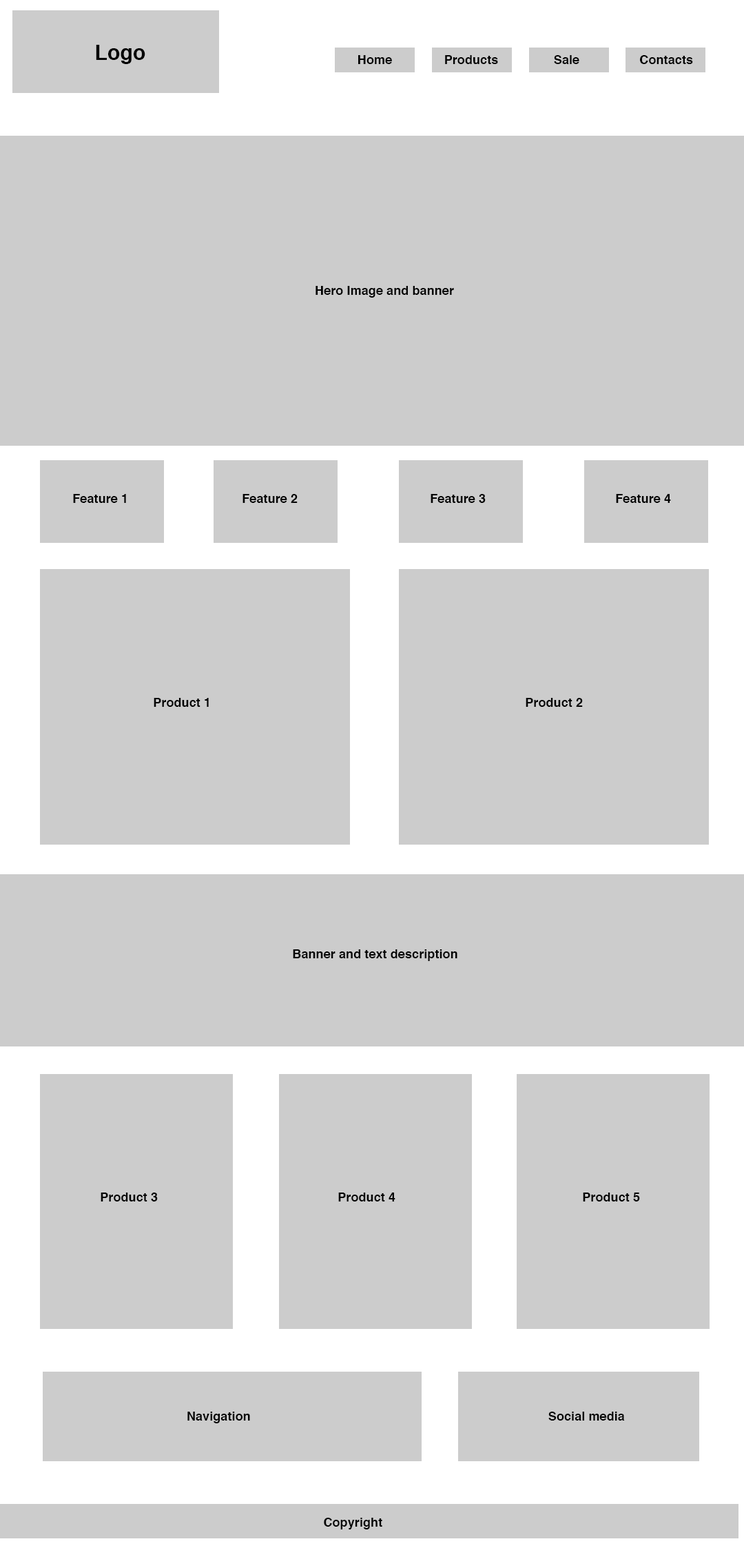
<style>
.page{position:relative;width:744px;height:1568px;background:#cccccc}
.page>*{position:absolute;margin:0}
.t1{font:20.7px "Helvetica-Bold";letter-spacing:0.005em;color:#020202}
.t2{font:12.4px "Helvetica-Bold";letter-spacing:0.005em;color:#020202}
</style>
<div class="page">
<p class="t1" style="left:96px;top:45px;width:49px;height:19px">Logo</p>
<p class="t2" style="left:358px;top:55px;width:34px;height:9px">Home</p>
<p class="t2" style="left:445px;top:55px;width:53px;height:9px">Products</p>
<p class="t2" style="left:554px;top:55px;width:25px;height:9px">Sale</p>
<p class="t2" style="left:640px;top:55px;width:53px;height:9px">Contacts</p>
<p class="t2" style="left:316px;top:286px;width:138px;height:12px">Hero Image and banner</p>
<p class="t2" style="left:73px;top:494px;width:53px;height:9px">Feature 1</p>
<p class="t2" style="left:243px;top:494px;width:55px;height:9px">Feature 2</p>
<p class="t2" style="left:431px;top:494px;width:55px;height:9px">Feature 3</p>
<p class="t2" style="left:616px;top:494px;width:55px;height:9px">Feature 4</p>
<p class="t2" style="left:154px;top:698px;width:55px;height:9px">Product 1</p>
<p class="t2" style="left:526px;top:698px;width:57px;height:9px">Product 2</p>
<p class="t2" style="left:293px;top:949px;width:164px;height:12px">Banner and text description</p>
<p class="t2" style="left:101px;top:1193px;width:57px;height:8px">Product 3</p>
<p class="t2" style="left:338px;top:1193px;width:57px;height:8px">Product 4</p>
<p class="t2" style="left:583px;top:1193px;width:57px;height:8px">Product 5</p>
<p class="t2" style="left:187px;top:1412px;width:63px;height:11px">Navigation</p>
<p class="t2" style="left:548px;top:1412px;width:77px;height:9px">Social media</p>
<p class="t2" style="left:324px;top:1518px;width:58px;height:11px">Copyright</p>
</div>
